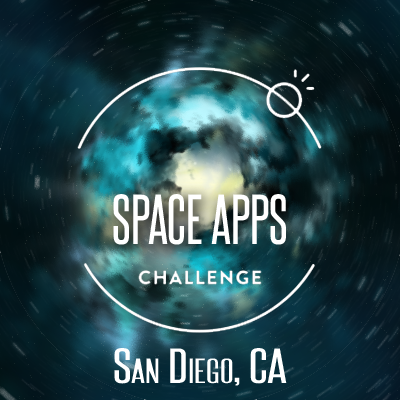
<style>
.page{position:relative;width:400px;height:400px}
.page>*{position:absolute;margin:0}
.t1{font:60px "SteelfishRg-Regular";color:#ffffff;font-variant:small-caps}
.t2{font:42px "SteelfishRg-Regular";color:#ffffff;font-variant:small-caps;scale:1.43 1}
</style>
<div class="page">
<p class="t1" style="left:113px;top:194px;width:173px;height:51px">SPACE APPS</p>
<p class="t2" style="left:114px;top:348px;width:173px;height:38px">San Diego, CA</p>
</div>
